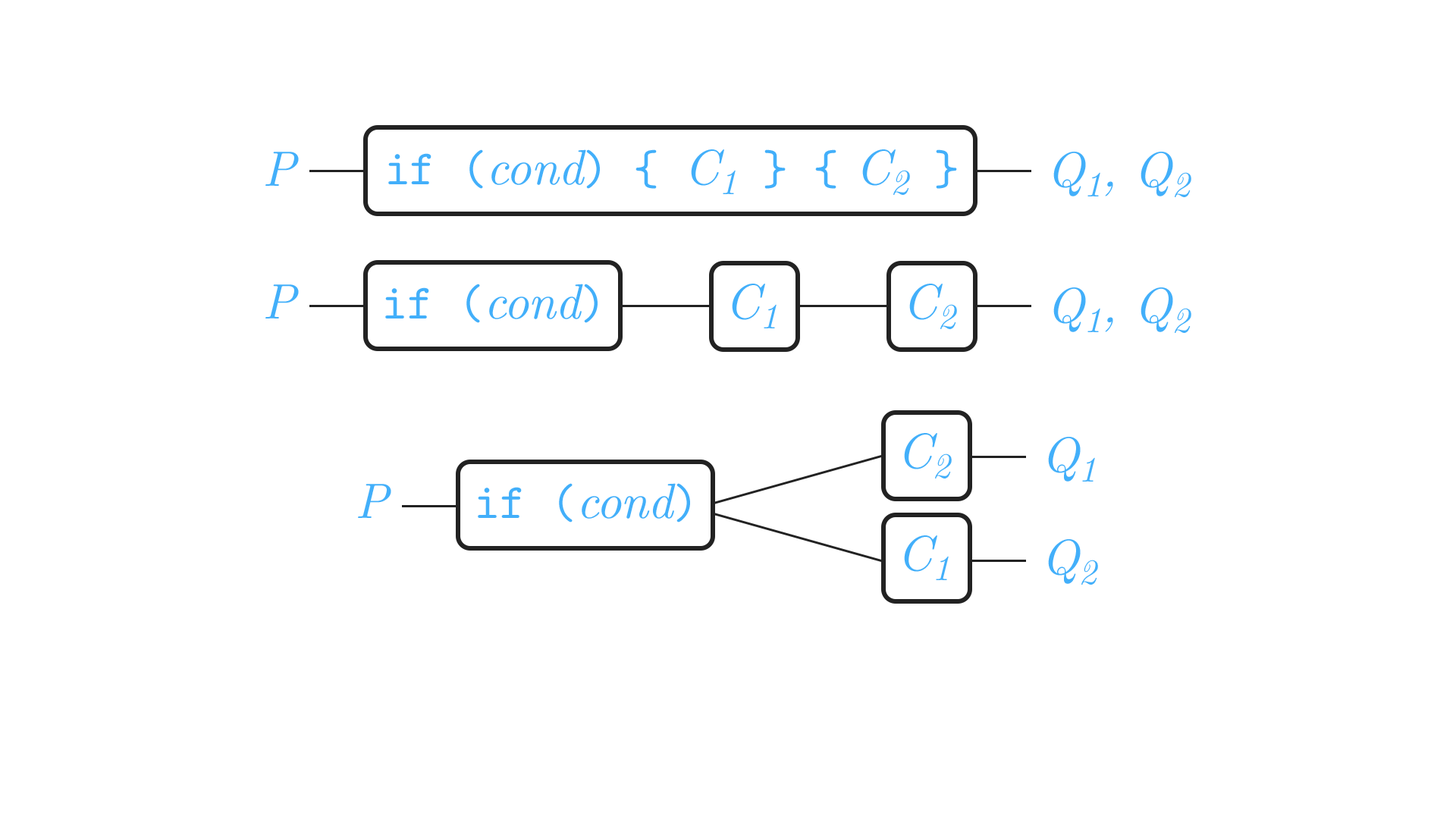
<style>
.page{position:relative;width:1456px;height:819px;background:#ffffff}
.page>*{position:absolute;margin:0}
.t1{font:49.4px "CMUTypewriter-Regular";letter-spacing:-0.01em;color:#42affa}
.t2{font:49.4px "CMUSerif-Italic";letter-spacing:-0.01em;color:#42affa}
.t3{font:35.6px "CMUSerif-Italic";letter-spacing:-0.01em;color:#42affa}
</style>
<div class="page">
<p class="t1" style="left:388px;top:149px;width:569px;height:46px">if (<span class="t2">cond</span>) { <span class="t2">C</span><span class="t3">1</span> } {<span class="t2"> C</span><span class="t3">2</span> }</p>
<p class="t2" style="left:265px;top:152px;width:34px;height:34px">P</p>
<p class="t2" style="left:1053px;top:152px;width:138px;height:45px">Q<span class="t3">1</span>, Q<span class="t3">2</span></p>
<p class="t2" style="left:265px;top:284px;width:34px;height:34px">P</p>
<p class="t1" style="left:385px;top:284px;width:213px;height:39px">if (<span class="t2">cond</span>)</p>
<p class="t2" style="left:732px;top:284px;width:45px;height:44px">C<span class="t3">1</span></p>
<p class="t2" style="left:909px;top:284px;width:48px;height:45px">C<span class="t3">2</span></p>
<p class="t2" style="left:1053px;top:287px;width:138px;height:46px">Q<span class="t3">1</span>, Q<span class="t3">2</span></p>
<p class="t2" style="left:904px;top:433px;width:48px;height:46px">C<span class="t3">2</span></p>
<p class="t2" style="left:1048px;top:437px;width:47px;height:45px">Q<span class="t3">1</span></p>
<p class="t2" style="left:358px;top:484px;width:33px;height:34px">P</p>
<p class="t1" style="left:478px;top:483px;width:212px;height:39px">if (<span class="t2">cond</span>)</p>
<p class="t2" style="left:904px;top:535px;width:45px;height:45px">C<span class="t3">1</span></p>
<p class="t2" style="left:1048px;top:539px;width:50px;height:46px">Q<span class="t3">2</span></p>
</div>
